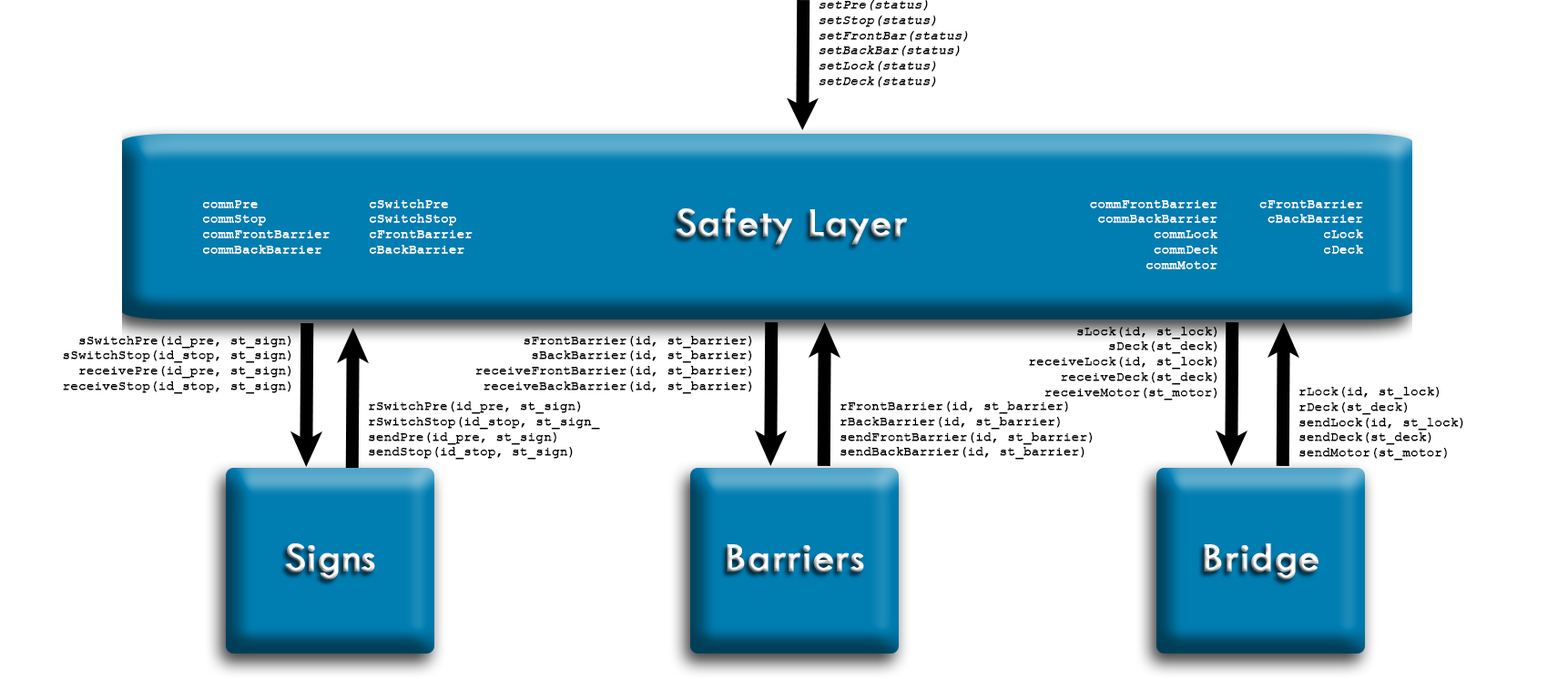
<style>
.page{position:relative;width:1568px;height:679px;background:#ffffff}
.page>*{position:absolute;margin:0}
.t1{font:12.7px "CourierNewPS-ItalicMT";color:#000000;font-weight:bold}
.t2{font:12.7px "CourierNewPSMT";color:#ffffff;font-weight:bold}
.t3{font:12.7px "CourierNewPSMT";color:#000000;font-weight:bold}
</style>
<div class="page">
<p class="t1" style="left:819px;top:0px;width:149px;height:87px">setPre(status)<br>setStop(status)<br>setFrontBar(status)<br>setBackBar(status)<br>setLock(status)<br>setDeck(status)</p>
<p class="t2" style="left:203px;top:200px;width:127px;height:54px">commPre<br>commStop<br>commFrontBarrier<br>commBackBarrier</p>
<p class="t2" style="left:370px;top:199px;width:103px;height:55px">cSwitchPre<br>cSwitchStop<br>cFrontBarrier<br>cBackBarrier</p>
<p class="t2" style="left:1090px;top:200px;width:127px;height:70px;text-align:right">commFrontBarrier<br>commBackBarrier<br>commLock<br>commDeck<br>commMotor</p>
<p class="t2" style="left:1259px;top:200px;width:104px;height:54px;text-align:right">cFrontBarrier<br>cBackBarrier<br>cLock<br>cDeck</p>
<p class="t3" style="left:1029px;top:327px;width:188px;height:74px;text-align:right">sLock(id, st_lock)<br>sDeck(st_deck)<br>receiveLock(id, st_lock)<br>receiveDeck(st_deck)<br>receiveMotor(st_motor)</p>
<p class="t3" style="left:63px;top:336px;width:228px;height:58px;text-align:right">sSwitchPre(id_pre, st_sign)<br>sSwitchStop(id_stop, st_sign)<br>receivePre(id_pre, st_sign)<br>receiveStop(id_stop, st_sign)</p>
<p class="t3" style="left:475px;top:336px;width:277px;height:58px;text-align:right">sFrontBarrier(id, st_barrier)<br>sBackBarrier(id, st_barrier)<br>receiveFrontBarrier(id, st_barrier)<br>receiveBackBarrier(id, st_barrier)</p>
<p class="t3" style="left:1299px;top:387px;width:164px;height:74px">rLock(id, st_lock)<br>rDeck(st_deck)<br>sendLock(id, st_lock)<br>sendDeck(st_deck)<br>sendMotor(st_motor)</p>
<p class="t3" style="left:369px;top:402px;width:231px;height:58px">rSwitchPre(id_pre, st_sign)<br>rSwitchStop(id_stop, st_sign_<br>sendPre(id_pre, st_sign)<br>sendStop(id_stop, st_sign)</p>
<p class="t3" style="left:840px;top:402px;width:253px;height:58px">rFrontBarrier(id, st_barrier)<br>rBackBarrier(id, st_barrier)<br>sendFrontBarrier(id, st_barrier)<br>sendBackBarrier(id, st_barrier)</p>
</div>
